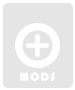
<style>
.page{position:relative;width:75px;height:90px;background:#e5e5e5}
.page>*{position:absolute;margin:0}
.t1{font:12px "Bauhaus93";letter-spacing:0.1em;color:#ffffff}
</style>
<div class="page">
<p class="t1" style="left:20px;top:72px;width:35px;height:9px">MODS</p>
</div>
